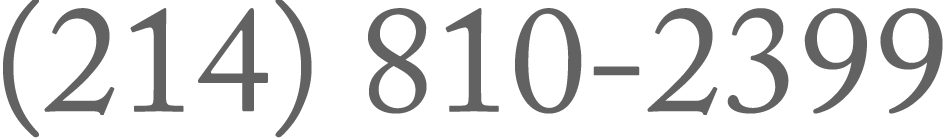
<style>
.page{position:relative;width:950px;height:139px;background:#ffffff}
.page>*{position:absolute;margin:0}
.t1{font:150.9px "ACaslonPro-Regular";color:#626262}
</style>
<div class="page">
<p class="t1" style="left:3px;top:0px;width:940px;height:138px">(214) 810-2399</p>
</div>
